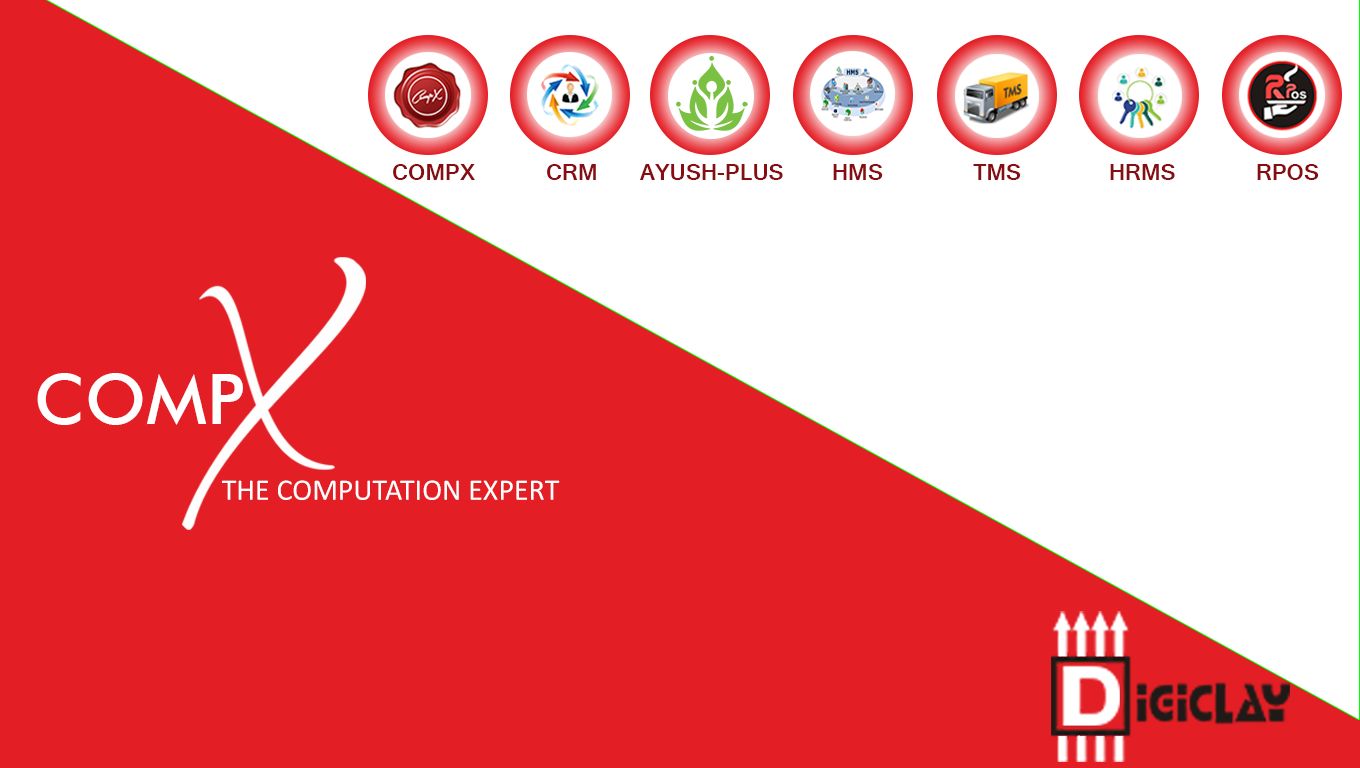
<style>
.page{position:relative;width:1360px;height:768px;background:#e31e25}
.page>*{position:absolute;margin:0}
.t1{font:24px "Gautami-Bold";color:#880d10}
.t2{font:70.5px "FuturaBT-Medium";color:#ffffff}
.t3{font:30px "Calibri";color:#ffffff}
</style>
<div class="page">
<p class="t1" style="left:393px;top:164px;width:82px;height:16px">COMPX</p>
<p class="t1" style="left:547px;top:164px;width:49px;height:16px">CRM</p>
<p class="t1" style="left:640px;top:164px;width:143px;height:16px">AYUSH-PLUS</p>
<p class="t1" style="left:833px;top:164px;width:50px;height:16px">HMS</p>
<p class="t1" style="left:973px;top:164px;width:48px;height:16px">TMS</p>
<p class="t1" style="left:1110px;top:164px;width:65px;height:16px">HRMS</p>
<p class="t1" style="left:1257px;top:164px;width:62px;height:16px">RPOS</p>
<p class="t2" style="left:37px;top:373px;width:206px;height:52px">COMP</p>
<p class="t3" style="left:222px;top:480px;width:338px;height:20px">THE COMPUTATION EXPERT</p>
</div>
